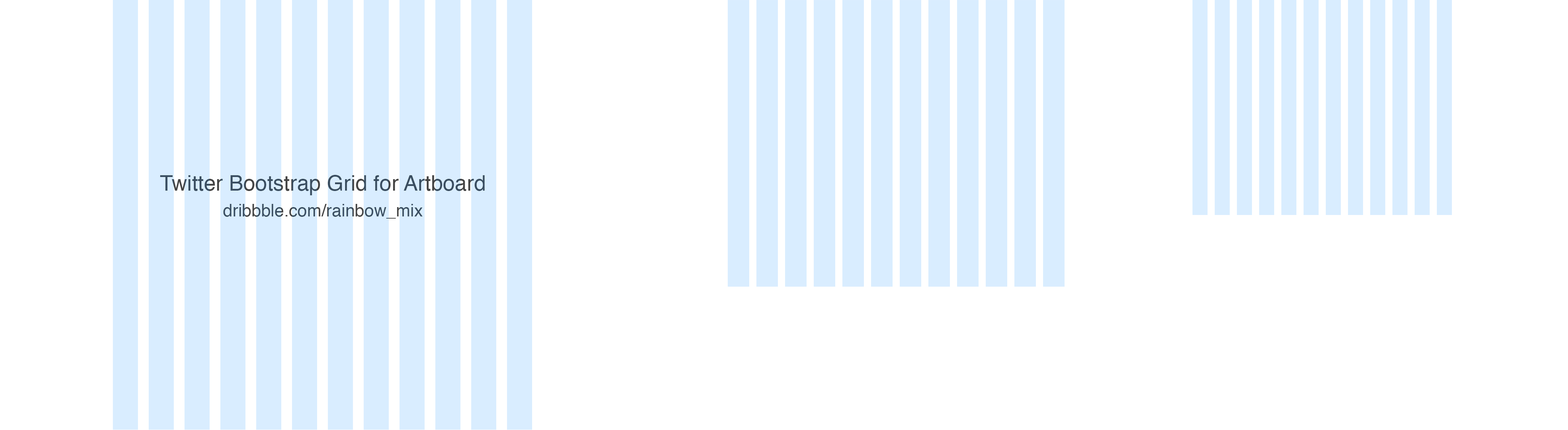
<style>
.page{position:relative;width:1568px;height:430px;background:#ffffff}
.page>*{position:absolute;margin:0}
.t1{font:21.5px/25.8px "Helvetica";color:#3a4e60}
.t2{font:17.2px/25.8px "Helvetica";color:#3a4e60}
</style>
<div class="page">
<p class="t1" style="left:160px;top:175px;width:325px;height:44px;text-align:center">Twitter Bootstrap Grid for Artboard<br><span class="t2">dribbble.com/rainbow_mix</span></p>
</div>
